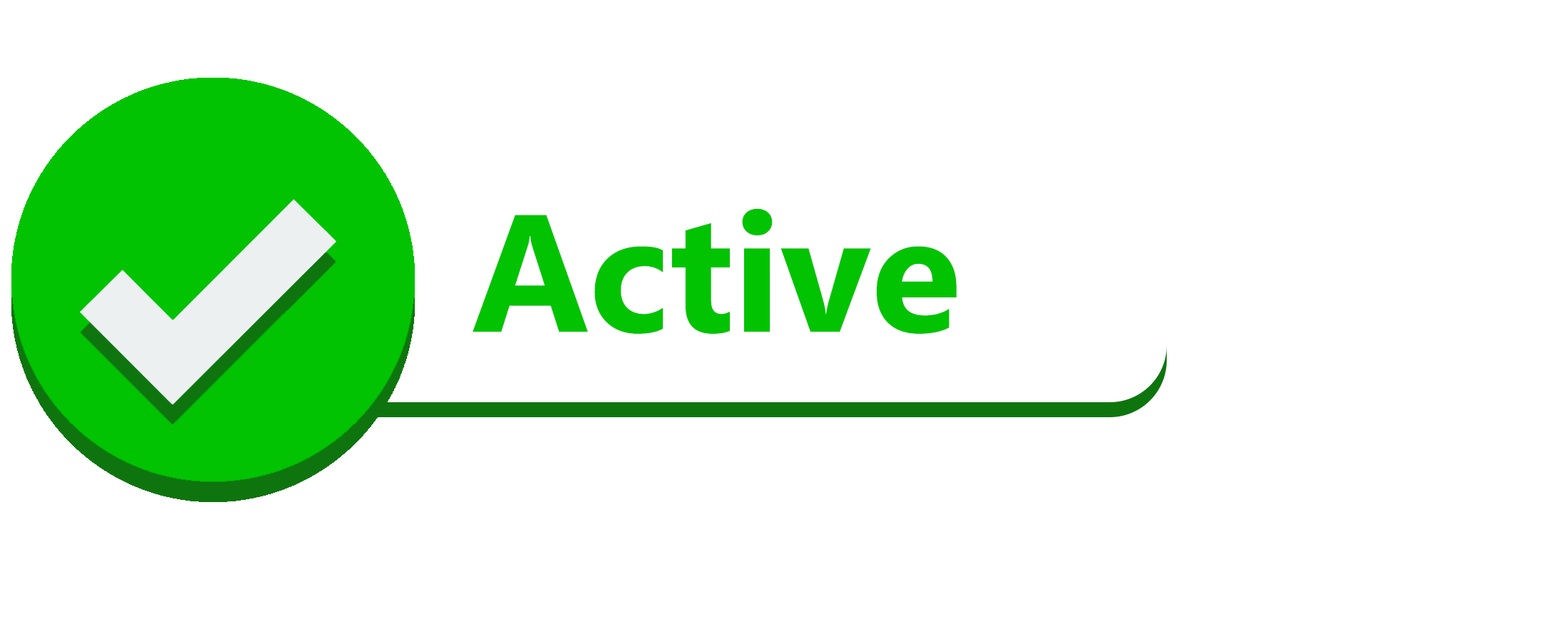
<style>
.page{position:relative;width:1568px;height:644px;background:#ffffff}
.page>*{position:absolute;margin:0}
.t1{font:166.3px "MicrosoftPhagsPa-Bold";color:#01c301}
</style>
<div class="page">
<p class="t1" style="left:473px;top:208px;width:483px;height:126px">Active</p>
</div>
